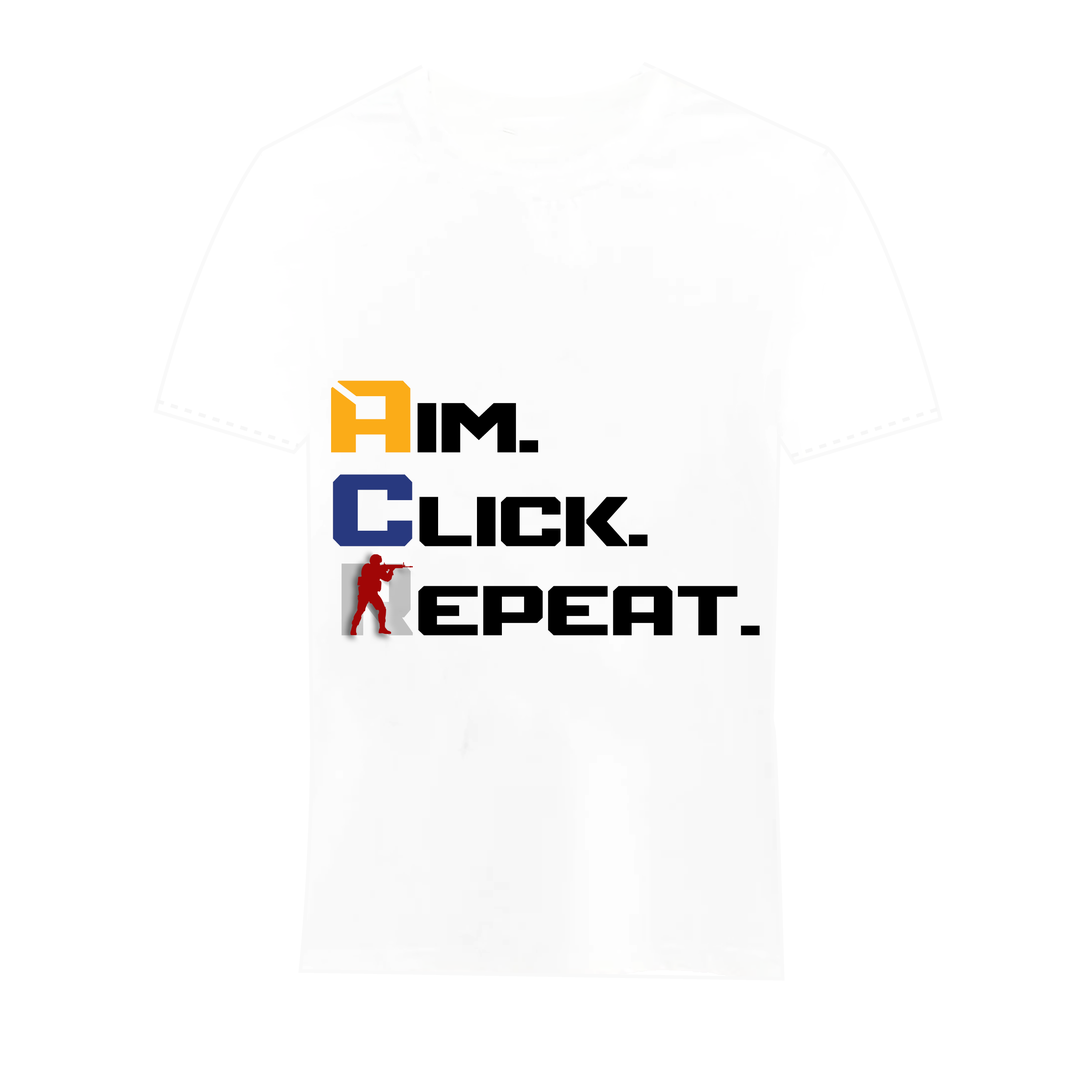
<style>
.page{position:relative;width:1092px;height:1092px;background:#ffffff}
.page>*{position:absolute;margin:0}
.t1{font:72.1px/93.7px "Mechfire";letter-spacing:-0.025em;color:#000000;scale:1.05 1}
.t2{font:82.6px/93.7px "Mechfire";letter-spacing:-0.025em;color:#000000;scale:0.92 1}
.t3{font:104.8px/93.7px "Mechfire";letter-spacing:-0.025em;color:#fbac18;scale:0.97 1}
.t4{font:78.6px/93.7px "Mechfire";letter-spacing:-0.025em;color:#000000;scale:0.97 1}
.t5{font:104.8px/93.7px "Mechfire";letter-spacing:-0.025em;color:#28397f;scale:0.97 1}
.t6{font:104.8px "Mechfire";letter-spacing:-0.025em;scale:0.84 1}
.t7{font:72.1px "Mechfire";letter-spacing:-0.025em;color:#000000;scale:1.05 1}
.t8{font:65.5px "Mechfire";letter-spacing:-0.025em;color:#000000;scale:1.16 1}
</style>
<div class="page">
<p class="t1" style="left:331px;top:380px;width:317px;height:166px;text-align:right"><span class="t2">.</span><span class="t3">A</span>im<br><span class="t4">.</span><span class="t5">c</span>lick</p>
<p class="t6" style="left:342px;top:563px;width:71px;height:73px">r</p>
<p class="t7" style="left:418px;top:586px;width:342px;height:50px"><span class="t8">.</span>epeat</p>
</div>
